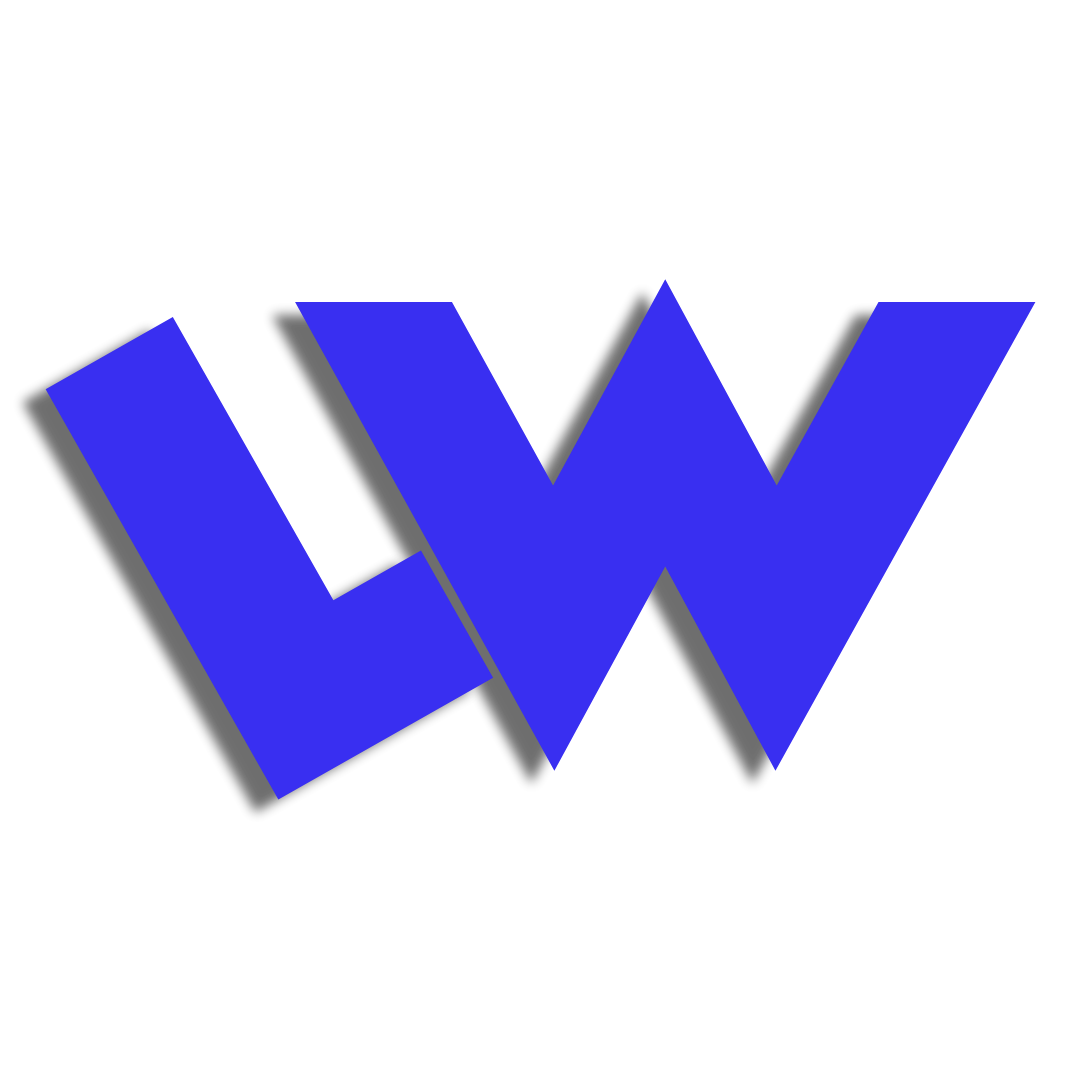
<style>
.page{position:relative;width:1080px;height:1080px;background:#ffffff}
.page>*{position:absolute;margin:0}
.t1{font:648.3px "Anagram";color:#392ff1}
.t2{font:689.6px "Anagram";color:#392ff1}
</style>
<div class="page">
<p class="t1" style="left:295px;top:279px;width:741px;height:492px">W</p>
<p class="t2" style="left:45px;top:317px;width:449px;height:483px;rotate:-30deg">L</p>
</div>
